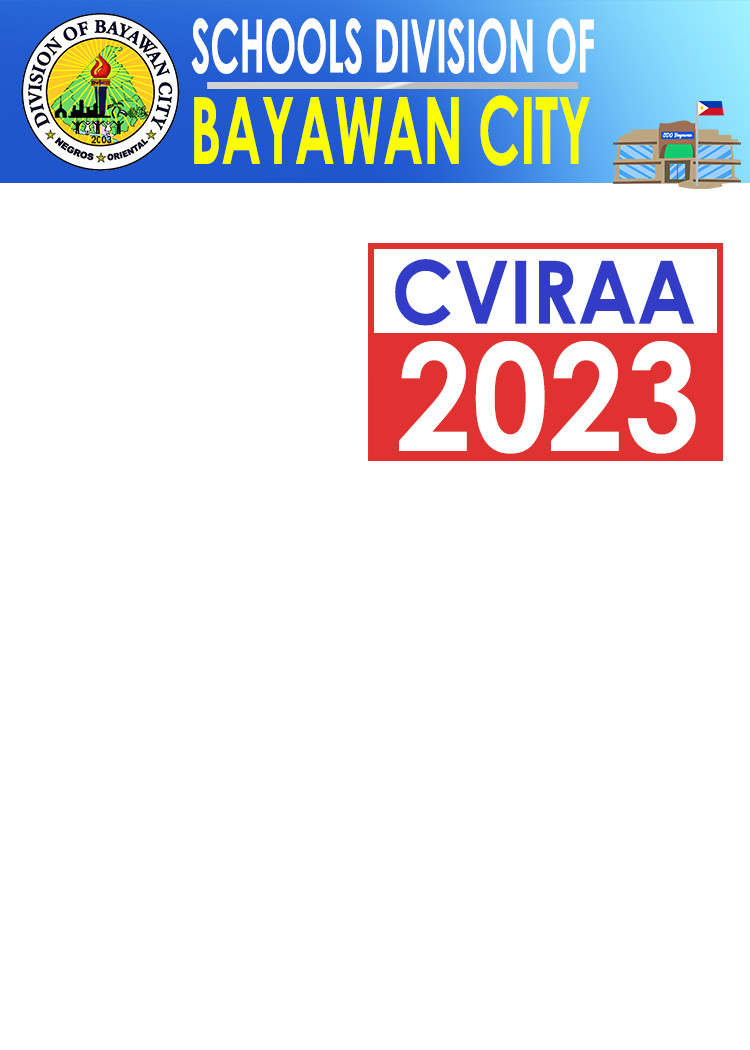
<style>
.page{position:relative;width:750px;height:1050px;background:#ffffff}
.page>*{position:absolute;margin:0}
.t1{font:73.5px "CenturyGothic-Bold";color:#ffffff;scale:0.51 1}
.t2{font:92.9px "CenturyGothic-Bold";color:#fcff00;scale:0.58 1}
.t3{font:87.6px "CenturyGothic-Bold";color:#323cc6;scale:0.91 1}
.t4{font:149.1px "CenturyGothic-Bold";color:#ffffff;scale:0.91 1}
</style>
<div class="page">
<p class="t1" style="left:191px;top:18px;width:403px;height:56px">SCHOOLS DIVISION OF</p>
<p class="t2" style="left:194px;top:95px;width:396px;height:71px">BAYAWAN CITY</p>
<p class="t3" style="left:395px;top:259px;width:300px;height:67px">CVIRAA</p>
<p class="t4" style="left:399px;top:341px;width:297px;height:113px">2023</p>
</div>
